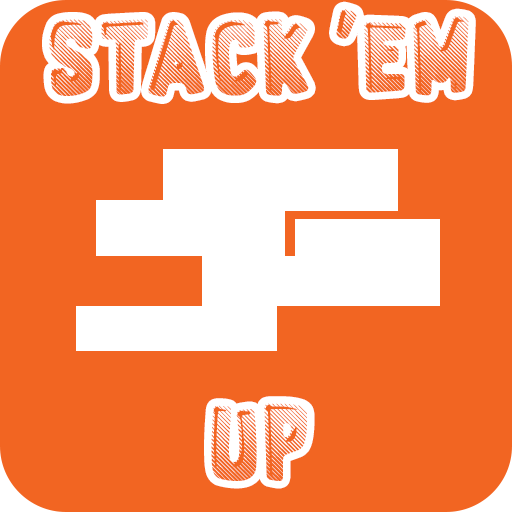
<style>
.page{position:relative;width:512px;height:512px;background:#f26522}
.page>*{position:absolute;margin:0}
.t1{font:49.5px "FluoGums";color:#ffffff}
</style>
<div class="page">
<p class="t1" style="left:42px;top:1px;width:434px;height:103px;text-align:center">STACK 'EM</p>
<p class="t1" style="left:204px;top:396px;width:111px;height:93px;text-align:center">UP</p>
</div>
